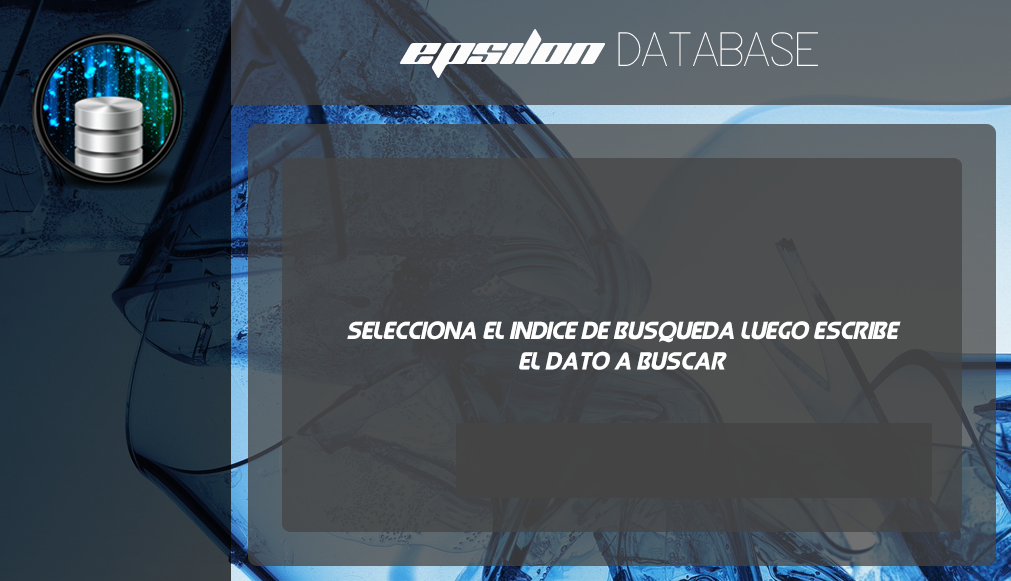
<style>
.page{position:relative;width:1011px;height:581px}
.page>*{position:absolute;margin:0}
.t1{font:25.3px "QueenofCamelot-Italic";color:#fefefe}
</style>
<div class="page">
<p class="t1" style="left:347px;top:321px;width:554px;height:49px;text-align:center">Selecciona el indice de busqueda luego escribe<br>el dato a buscar</p>
</div>
